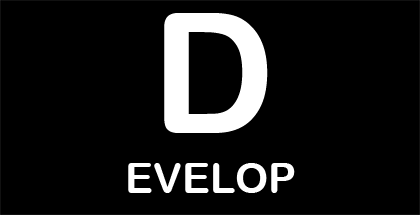
<style>
.page{position:relative;width:420px;height:215px;background:#000000}
.page>*{position:absolute;margin:0}
.t1{font:168px "ArialRoundedMTBold";color:#ffffff}
.t2{font:42px "ArialRoundedMTBold";color:#ffffff}
</style>
<div class="page">
<p class="t1" style="left:164px;top:13px;width:104px;height:120px">D</p>
<p class="t2" style="left:128px;top:163px;width:167px;height:30px">EVELOP</p>
</div>
